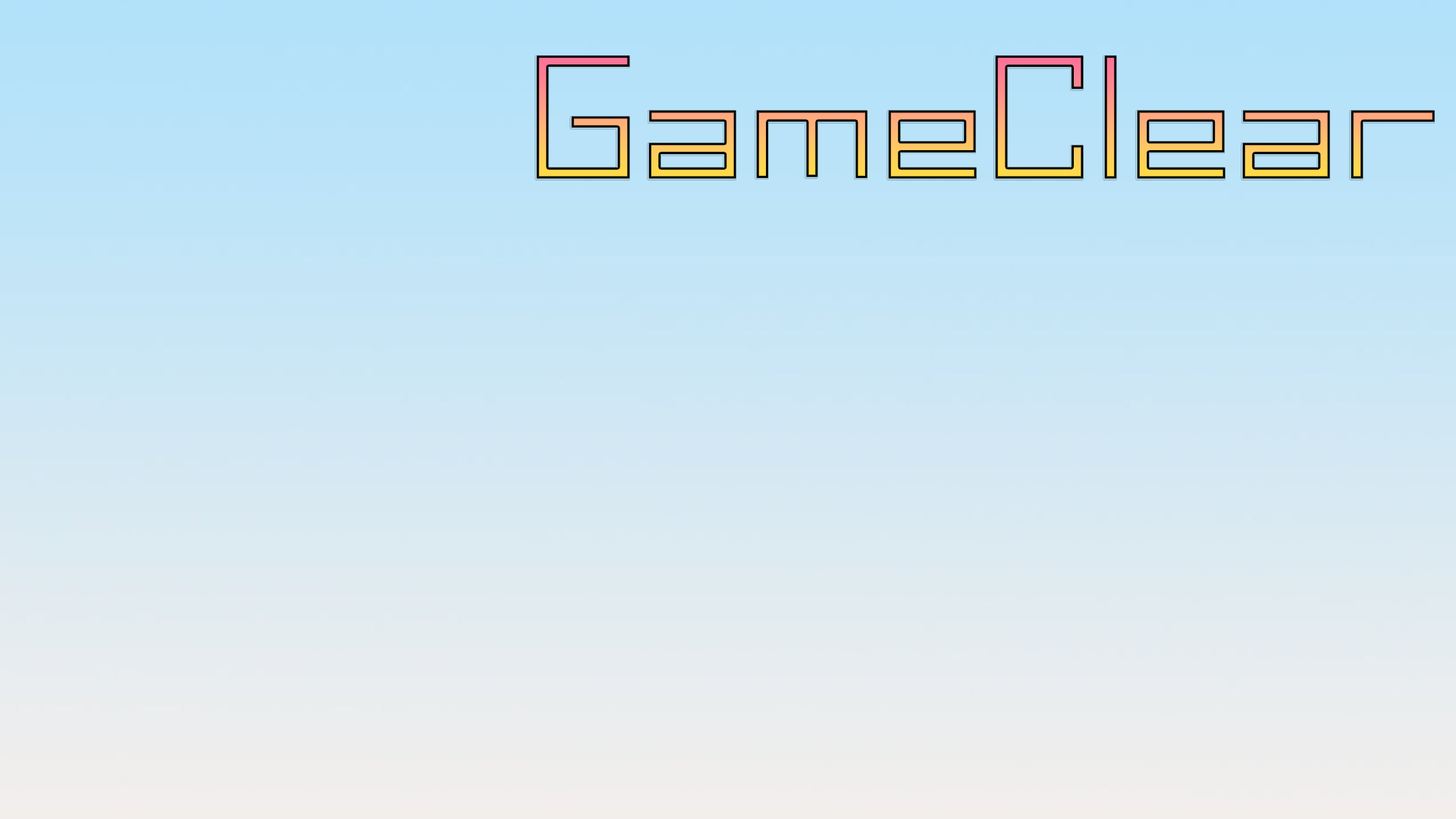
<style>
.page{position:relative;width:1456px;height:819px}
.page>*{position:absolute;margin:0}
.t1{font:151.7px "Makinas-4-Square"}
</style>
<div class="page">
<p class="t1" style="left:536px;top:55px;width:899px;height:124px">GameClear</p>
</div>
